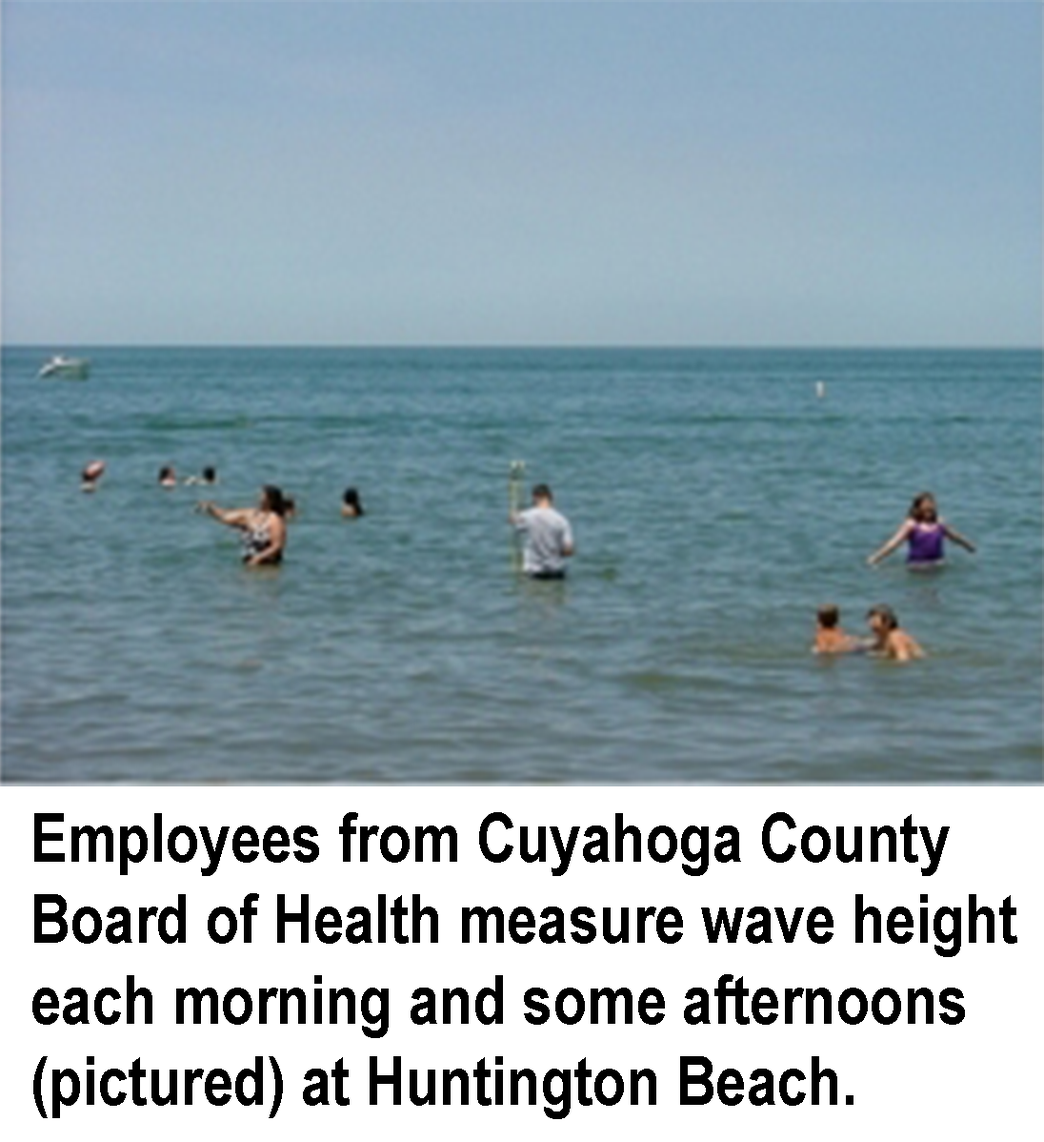
<style>
.page{position:relative;width:1044px;height:1142px;background:#ffffff}
.page>*{position:absolute;margin:0}
.t1{font:67.5px "ArialNarrow-Bold";color:#000000}
</style>
<div class="page">
<p class="t1" style="left:32px;top:812px;width:986px;height:307px">Employees from Cuyahoga County <br>Board of Health measure wave height<br>each morning and some afternoons<br>(pictured) at Huntington Beach.</p>
</div>
